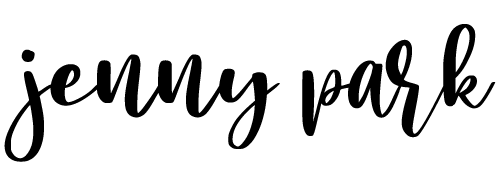
<style>
.page{position:relative;width:500px;height:185px;background:#ffffff}
.page>*{position:absolute;margin:0}
.t1{font:108.3px "MangoSalsaPersonalUse";color:#000000}
</style>
<div class="page">
<p class="t1" style="left:4px;top:24px;width:492px;height:138px">jenny park</p>
</div>
